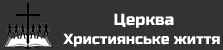
<style>
.page{position:relative;width:223px;height:50px;background:#333333}
.page>*{position:absolute;margin:0}
.t1{font:16px "RussoOne-Regular";color:#ffffff}
.t2{font:14.7px "RussoOne-Regular";color:#ffffff}
</style>
<div class="page">
<p class="t1" style="left:114px;top:13px;width:60px;height:15px">Церква</p>
<p class="t2" style="left:63px;top:33px;width:157px;height:14px">Християнське життя</p>
</div>
